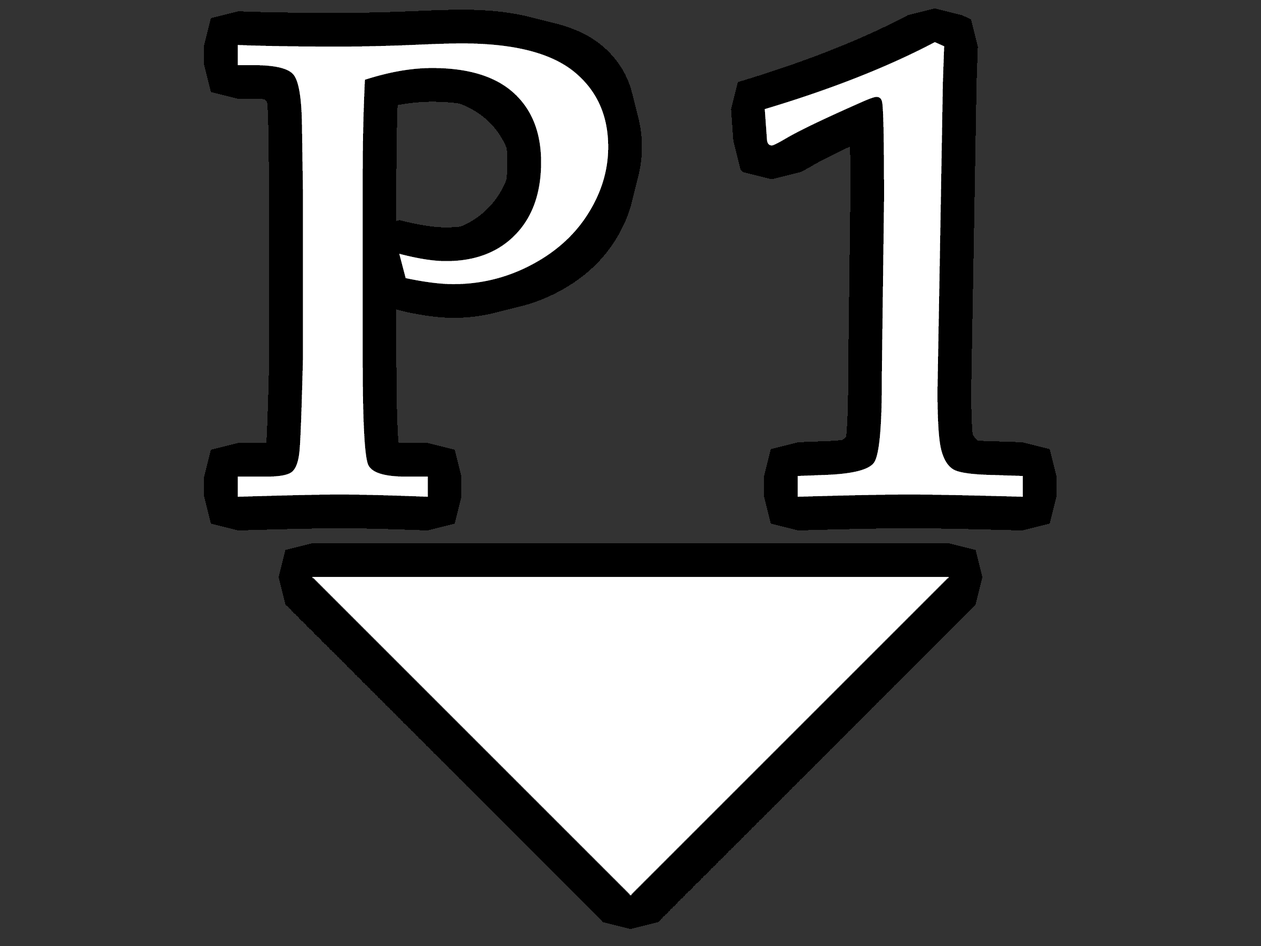
<style>
.page{position:relative;width:1261px;height:946px;background:#333333}
.page>*{position:absolute;margin:0}
.t1{font:649.6px "BookAntiqua";color:#ffffff}
</style>
<div class="page">
<p class="t1" style="left:238px;top:42px;width:785px;height:455px">P 1</p>
</div>
